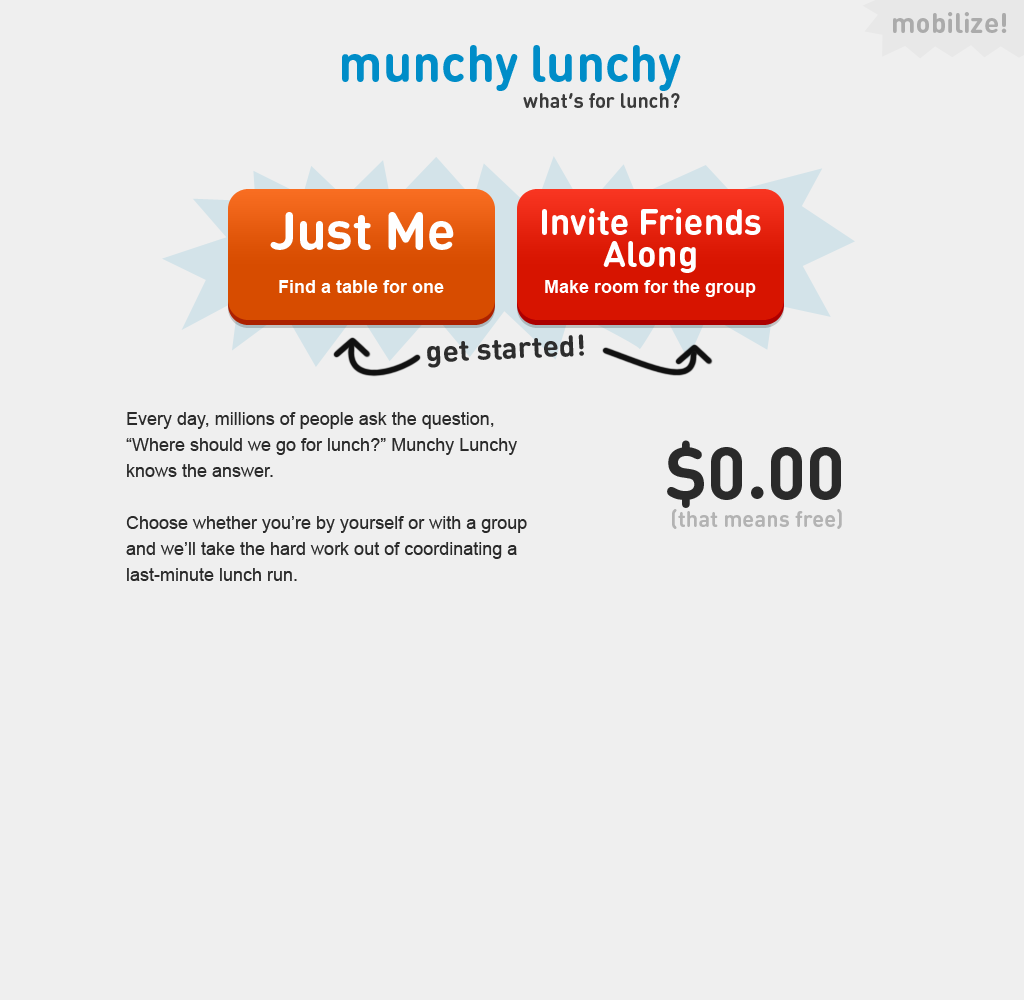
<style>
.page{position:relative;width:1024px;height:1000px;background:#efefef}
.page>*{position:absolute;margin:0}
.t1{font:28px "DINRoundOT-Bold";color:#ababab}
.t2{font:51px "DINRoundOT-Bold";color:#008dc8}
.t3{font:20px "DINRoundOT-Bold";color:#3b3b3b}
.t4{font:36px/32px "DINRoundOT-Bold";color:#ffffff}
.t5{font:53.2px "DINRoundOT-Bold";color:#ffffff}
.t6{font:18px "Arial-BoldMT";color:#ffffff}
.t7{font:29.8px "DINRoundOT-Bold";color:#2d2d2d}
.t8{font:18px/26px "ArialMT";color:#2a2a2a}
.t9{font:72px "DINRoundOT-Bold";color:#2a2a2a}
.t10{font:22px "DINRoundOT-Bold";color:#b3b3b3}
</style>
<div class="page">
<p class="t1" style="left:893px;top:12px;width:114px;height:21px">mobilize!</p>
<p class="t2" style="left:342px;top:45px;width:339px;height:46px">munchy lunchy</p>
<p class="t3" style="left:523px;top:93px;width:157px;height:15px">what’s for lunch?</p>
<p class="t4" style="left:542px;top:208px;width:219px;height:65px;text-align:center">Invite Friends<br>Along</p>
<p class="t5" style="left:270px;top:212px;width:184px;height:38px">Just Me</p>
<p class="t6" style="left:279px;top:280px;width:165px;height:13px">Find a table for one</p>
<p class="t6" style="left:545px;top:280px;width:211px;height:17px">Make room for the group</p>
<p class="t7" style="left:427px;top:334px;width:157px;height:34px;rotate:-2deg">get started!</p>
<p class="t8" style="left:126px;top:412px;width:401px;height:169px">Every day, millions of people ask the question, “Where should we go for lunch?” Munchy Lunchy knows the answer.<br><br>Choose whether you’re by yourself or with a group and we’ll take the hard work out of coordinating a last-minute lunch run.</p>
<p class="t9" style="left:667px;top:440px;width:174px;height:68px">$0.00</p>
<p class="t10" style="left:672px;top:509px;width:170px;height:20px">(that means free)</p>
</div>
